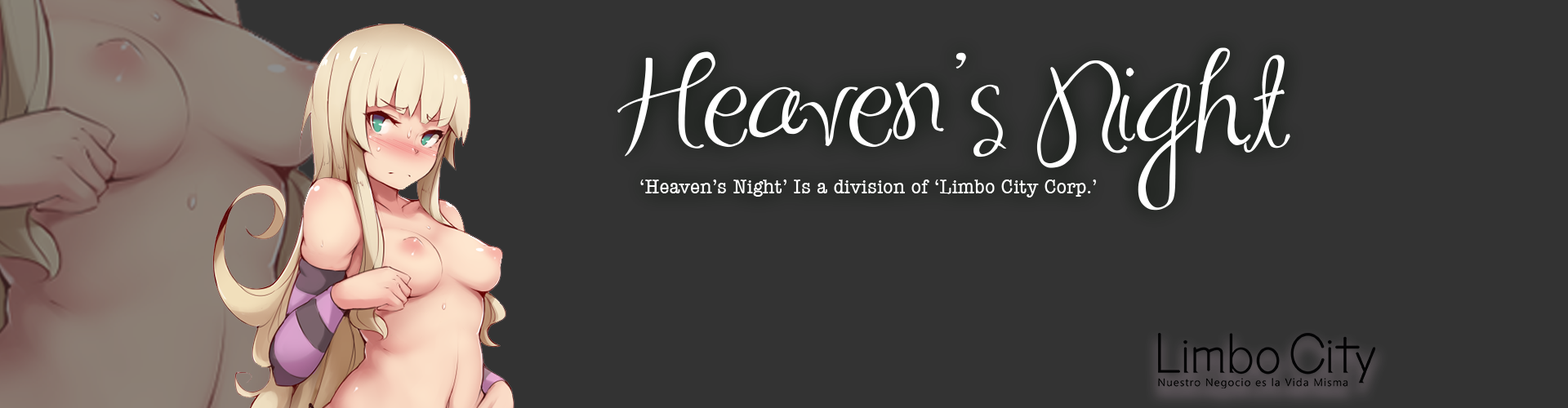
<style>
.page{position:relative;width:1568px;height:408px;background:#333333}
.page>*{position:absolute;margin:0}
.t1{font:91.9px "MASexy";color:#ffffff;scale:1.17 1}
.t2{font:20.4px "AmericanTypewriter-Condensed";color:#ffffff;scale:1.17 1}
</style>
<div class="page">
<p class="t1" style="left:617px;top:47px;width:673px;height:164px;text-align:center">Heaven’s Night</p>
<p class="t2" style="left:640px;top:180px;width:456px;height:18px">‘Heaven’s Night’ Is a division of ‘Limbo City Corp.’</p>
</div>
